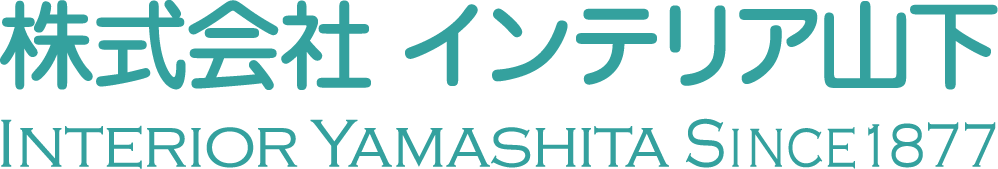
<style>
.page{position:relative;width:998px;height:169px;background:#ffffff}
.page>*{position:absolute;margin:0}
.t1{font:96.9px "Jun34Pro-Medium";letter-spacing:-0.06em;color:#34a19e}
.t2{font:96.9px "Jun34Pro-Medium";letter-spacing:-0.08em;color:#34a19e}
.t3{font:70.2px "CopperplateGothic-Light";letter-spacing:-0.02em;color:#34a19e}
.t4{font:70.2px "CopperplateGothic-Light";color:#34a19e}
.t5{font:70.2px "CopperplateGothic-Light";color:#34a19e;scale:0.8 1}
.t6{font:56.5px "CopperplateGothic-Light";color:#34a19e;scale:0.8 1}
.t7{font:63.3px "CopperplateGothic-Light";color:#34a19e;scale:0.8 1}
</style>
<div class="page">
<p class="t1" style="left:0px;top:0px;width:998px;height:90px">株式会社 イン<span class="t2">テリア山下</span></p>
<p class="t3" style="left:1px;top:118px;width:995px;height:51px"><span class="t4">Interior </span>Yamashita <span class="t5">S</span><span class="t6">INCE</span><span class="t7">1877</span></p>
</div>
